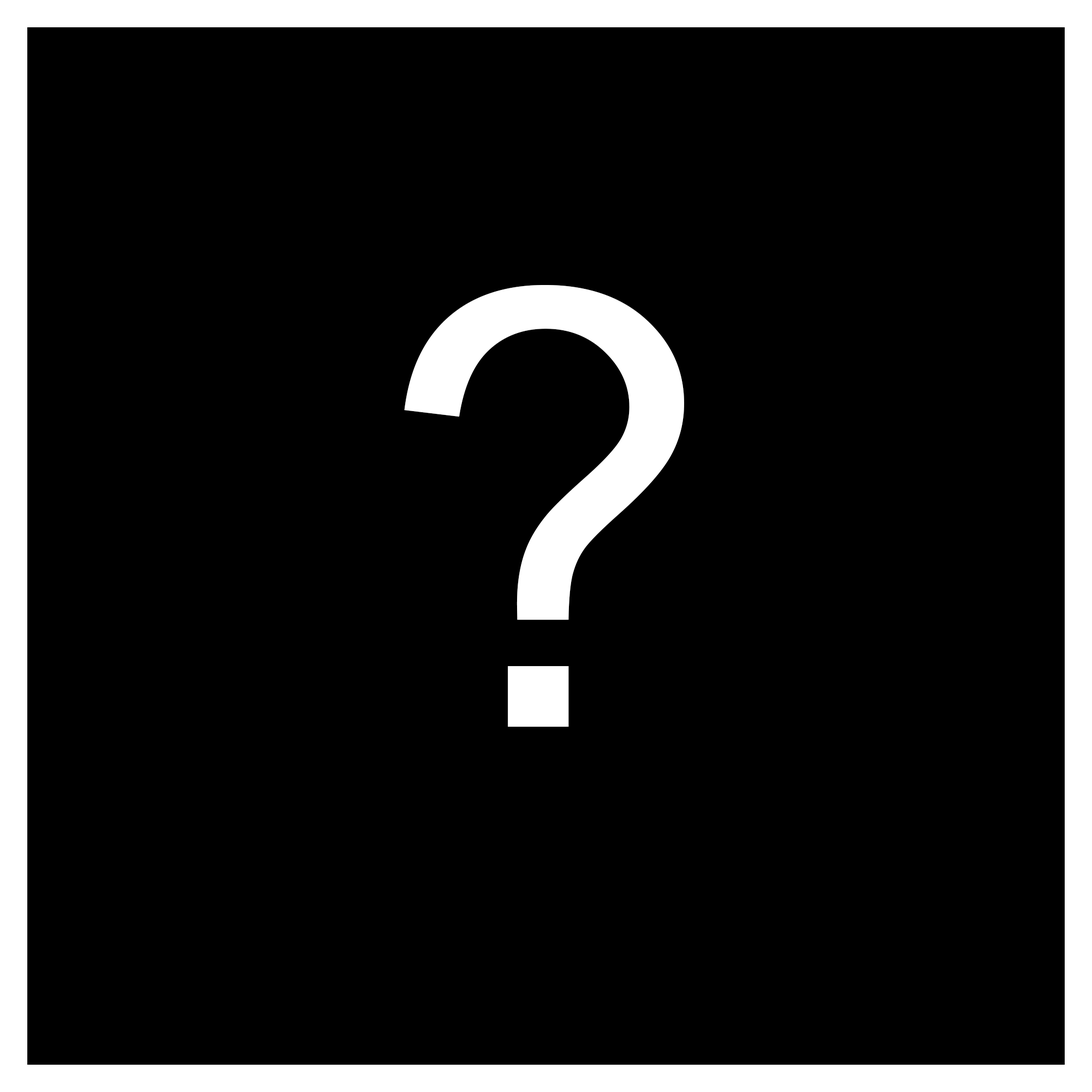
<style>
.page{position:relative;width:1092px;height:1092px;background:#000000}
.page>*{position:absolute;margin:0}
.t1{font:606.7px "ArialMT";color:#ffffff}
</style>
<div class="page">
<p class="t1" style="left:404px;top:285px;width:280px;height:442px">?</p>
</div>
